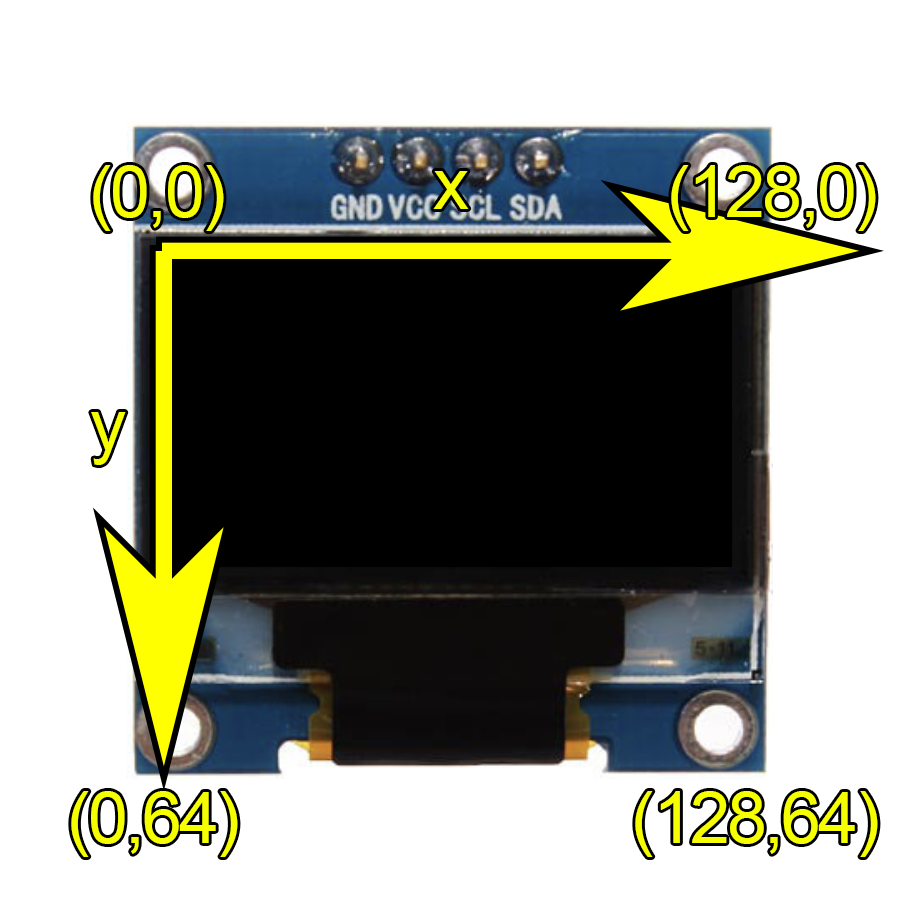
<style>
.page{position:relative;width:900px;height:900px;background:#ffffff}
.page>*{position:absolute;margin:0}
.t1{font:72px "ArialMT";letter-spacing:-0.04em;color:#f6ff00}
</style>
<div class="page">
<p class="t1" style="left:93px;top:165px;width:131px;height:66px">(0,0)</p>
<p class="t1" style="left:433px;top:171px;width:36px;height:38px">x</p>
<p class="t1" style="left:671px;top:165px;width:205px;height:66px">(128,0)</p>
<p class="t1" style="left:91px;top:412px;width:35px;height:53px">y</p>
<p class="t1" style="left:71px;top:791px;width:167px;height:66px">(0,64)</p>
<p class="t1" style="left:635px;top:791px;width:243px;height:66px">(128,64)</p>
</div>
